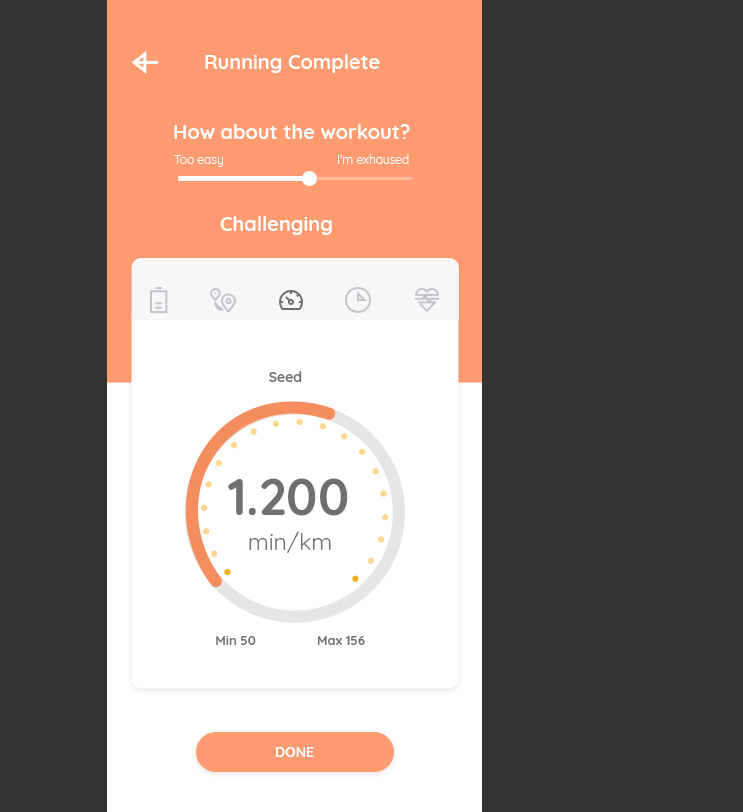
<style>
.page{position:relative;width:743px;height:812px;background:#333333}
.page>*{position:absolute;margin:0}
.t1{font:20px "Quicksand-Bold";color:#ffffff}
.t2{font:12px "Quicksand-Regular";color:#ffffff}
.t3{font:14px "Quicksand-Bold";color:#707070}
.t4{font:51px "Quicksand-Bold";color:#707070}
.t5{font:23px "Quicksand-Regular";color:#707070}
.t6{font:13px "Quicksand-Bold";color:#707070}
.t7{font:14px "Quicksand-Bold";color:#ffffff}
</style>
<div class="page">
<p class="t1" style="left:205px;top:54px;width:175px;height:19px">Running Complete</p>
<p class="t1" style="left:174px;top:124px;width:236px;height:15px">How about the workout?</p>
<p class="t2" style="left:174px;top:155px;width:49px;height:12px">Too easy</p>
<p class="t2" style="left:338px;top:154px;width:71px;height:10px">I'm exhaused</p>
<p class="t1" style="left:220px;top:216px;width:112px;height:19px">Challenging</p>
<p class="t3" style="left:269px;top:371px;width:33px;height:11px">Seed</p>
<p class="t4" style="left:228px;top:478px;width:120px;height:38px">1.200</p>
<p class="t5" style="left:249px;top:531px;width:82px;height:22px">min/km</p>
<p class="t6" style="left:216px;top:636px;width:40px;height:9px">Min 50</p>
<p class="t6" style="left:317px;top:636px;width:48px;height:9px">Max 156</p>
<p class="t7" style="left:275px;top:747px;width:39px;height:10px">DONE</p>
</div>
